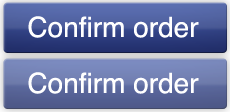
<style>
.page{position:relative;width:230px;height:112px}
.page>*{position:absolute;margin:0}
.t1{font:28px "Helvetica";color:#ffffff}
</style>
<div class="page">
<p class="t1" style="left:28px;top:16px;width:171px;height:22px">Confirm order</p>
<p class="t1" style="left:28px;top:72px;width:171px;height:22px">Confirm order</p>
</div>
